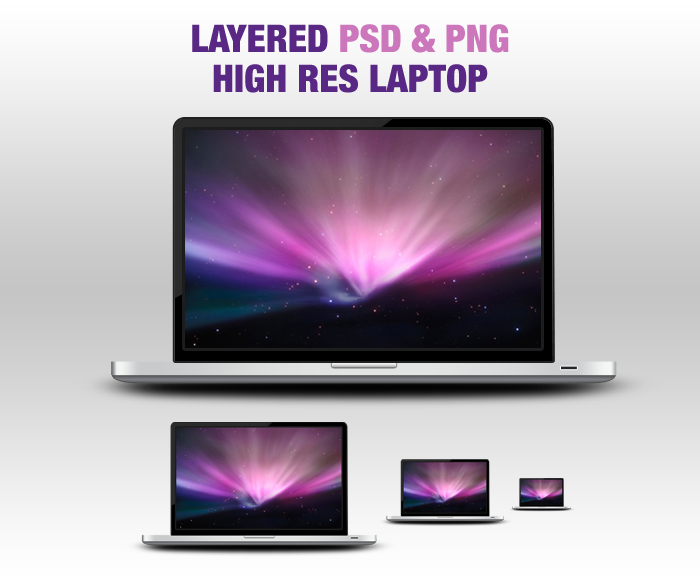
<style>
.page{position:relative;width:700px;height:581px}
.page>*{position:absolute;margin:0}
.t1{font:38.3px/39.8px "HelveticaNeue-CondensedBlack";color:#592884;text-transform:uppercase}
.t2{font:38.3px/39.8px "HelveticaNeue-CondensedBlack";color:#cc76bb;text-transform:uppercase}
</style>
<div class="page">
<p class="t1" style="left:192px;top:24px;width:317px;height:69px;text-align:center">Layered <span class="t2">PSD &amp; PNG<br></span>High Res Laptop</p>
</div>
